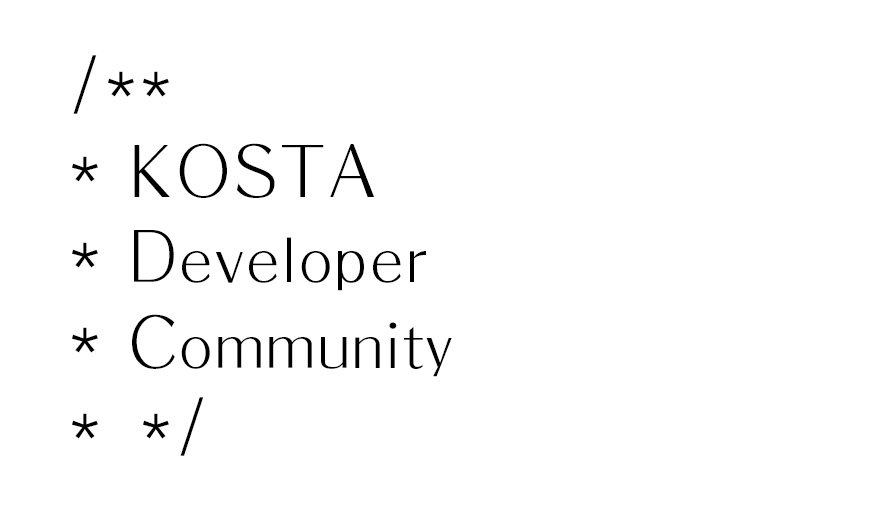
<style>
.page{position:relative;width:880px;height:526px;background:#ffffff}
.page>*{position:absolute;margin:0}
.t1{font:71.2px "DotumChe";color:#000000}
.t2{font:61px "HYgprM";color:#000000}
.t3{font:71.2px "HYgprM";color:#000000}
</style>
<div class="page">
<p class="t1" style="left:72px;top:55px;width:132px;height:401px">/**<br>*<br>*<br>*<br>* */</p>
<p class="t2" style="left:132px;top:143px;width:320px;height:234px"><span class="t3">KOSTA<br>D</span>eveloper<br><span class="t3">C</span>ommunity</p>
</div>
